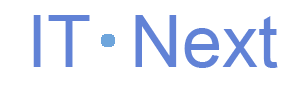
<style>
.page{position:relative;width:300px;height:100px;background:#ffffff}
.page>*{position:absolute;margin:0}
.t1{font:72px "ArialMT";color:#6182d6}
</style>
<div class="page">
<p class="t1" style="left:33px;top:15px;width:245px;height:53px">IT  Next</p>
</div>
